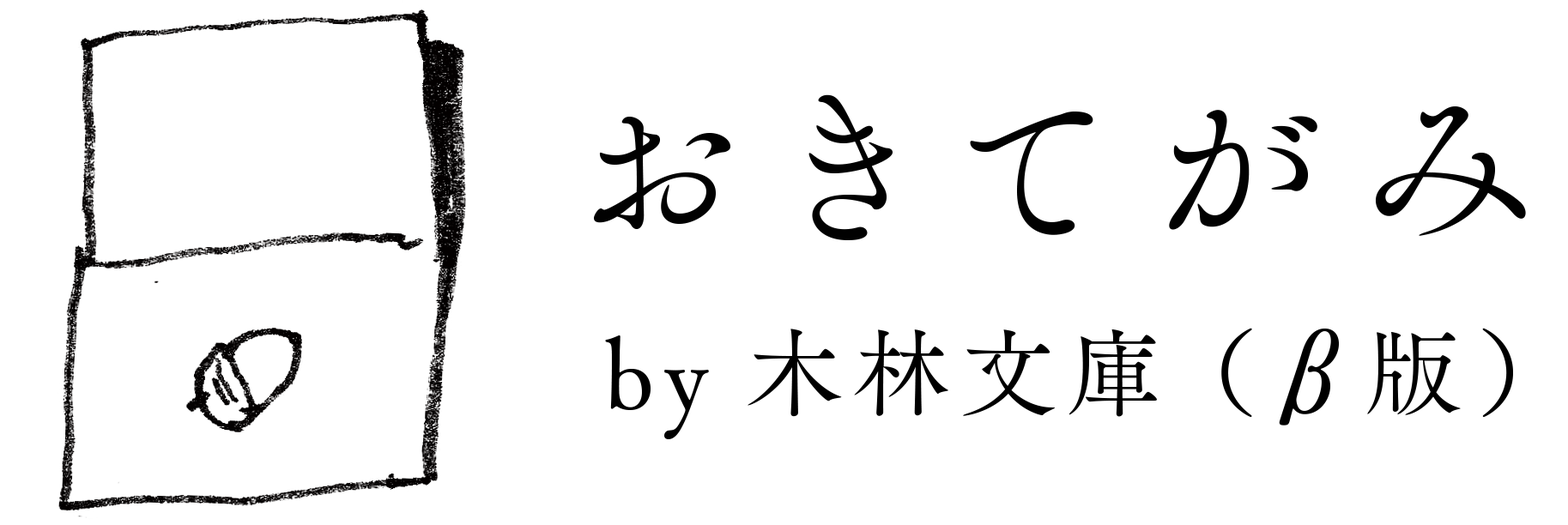
<style>
.page{position:relative;width:1568px;height:525px;background:#ffffff}
.page>*{position:absolute;margin:0}
.t1{font:174.4px "TsukuOldMinPro-R";letter-spacing:0.1em;color:#010101}
.t2{font:96.9px "TsukuOldMinPro-R";letter-spacing:0.1em;color:#000000}
.t3{font:106.6px "TsukuOldMinPro-R";letter-spacing:0.1em;color:#000000}
</style>
<div class="page">
<p class="t1" style="left:594px;top:94px;width:932px;height:146px">おきてがみ</p>
<p class="t2" style="left:605px;top:328px;width:908px;height:111px">by 木林文庫（<span class="t3">β</span>版）</p>
</div>
